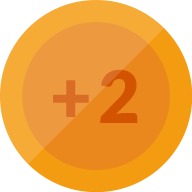
<style>
.page{position:relative;width:192px;height:192px;background:#ed993f}
.page>*{position:absolute;margin:0}
.t1{font:72px "Lato-Black";letter-spacing:0.075em}
</style>
<div class="page">
<p class="t1" style="left:53px;top:69px;width:85px;height:54px">+2</p>
</div>
